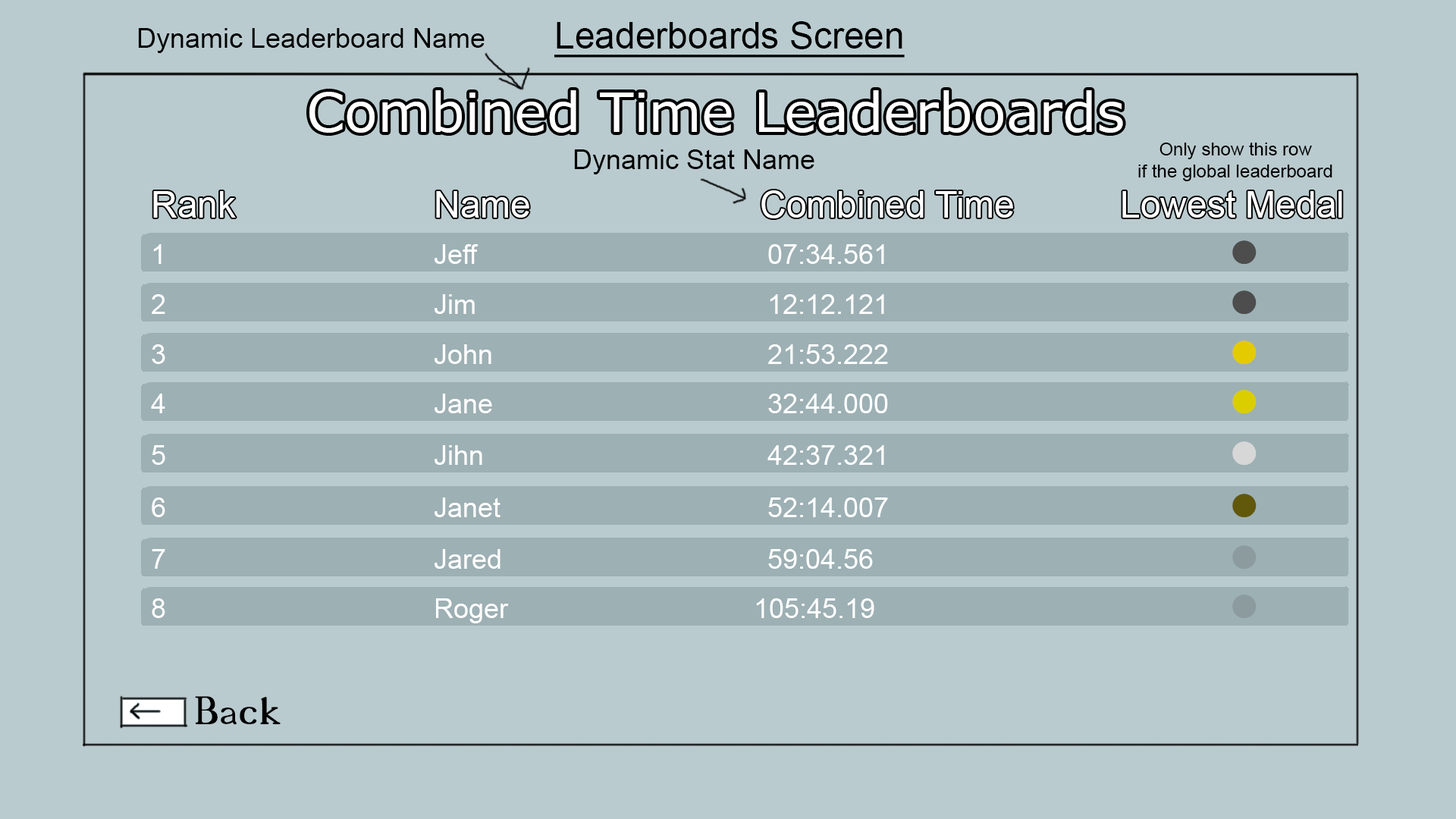
<style>
.page{position:relative;width:1456px;height:819px;background:#bacbcf}
.page>*{position:absolute;margin:0}
.t1{font:27.3px "ArialMT";color:#000000}
.t2{font:36.4px "ArialMT";color:#000000;text-decoration:underline}
.t3{font:54.6px "Verdana";color:#ffffff}
.t4{font:18.2px "ArialMT";color:#000000}
.t5{font:36.4px "ArialMT";color:#ffffff}
.t6{font:27.3px "ArialMT";color:#ffffff}
.t7{font:54.6px "ArialMT";color:#4d4d4d}
.t8{font:54.6px "ArialMT";color:#e3cb00}
.t9{font:54.6px "ArialMT";color:#dbce00}
.t10{font:54.6px "ArialMT";color:#d7d7d7}
.t11{font:54.6px "ArialMT";color:#61580b}
.t12{font:54.6px "ArialMT";color:#8c9b9e}
.t13{font:54.6px "18thCentury";color:#000000}
</style>
<div class="page">
<p class="t1" style="left:138px;top:28px;width:347px;height:25px">Dynamic Leaderboard Name</p>
<p class="t2" style="left:554px;top:21px;width:351px;height:37px">Leaderboards Screen</p>
<p class="t3" style="left:309px;top:90px;width:814px;height:43px">Combined Time Leaderboards</p>
<p class="t1" style="left:574px;top:149px;width:240px;height:25px">Dynamic Stat Name</p>
<p class="t4" style="left:1138px;top:142px;width:194px;height:39px;text-align:center">Only show this row<br>if the global leaderboard</p>
<p class="t5" style="left:153px;top:191px;width:83px;height:27px">Rank</p>
<p class="t5" style="left:436px;top:191px;width:93px;height:27px">Name</p>
<p class="t5" style="left:761px;top:190px;width:252px;height:28px">Combined Time</p>
<p class="t5" style="left:1122px;top:191px;width:220px;height:27px">Lowest Medal</p>
<p class="t6" style="left:153px;top:244px;width:9px;height:20px">1</p>
<p class="t6" style="left:434px;top:244px;width:45px;height:20px">Jeff</p>
<p class="t6" style="left:768px;top:244px;width:116px;height:20px">07:34.561</p>
<p class="t7" style="left:1232px;top:240px;width:25px;height:24px">●</p>
<p class="t7" style="left:1232px;top:290px;width:25px;height:24px">●</p>
<p class="t6" style="left:152px;top:294px;width:13px;height:20px">2</p>
<p class="t6" style="left:434px;top:294px;width:41px;height:20px">Jim</p>
<p class="t6" style="left:770px;top:294px;width:114px;height:20px">12:12.121</p>
<p class="t8" style="left:1232px;top:340px;width:25px;height:24px">●</p>
<p class="t6" style="left:152px;top:344px;width:13px;height:20px">3</p>
<p class="t6" style="left:434px;top:344px;width:57px;height:20px">John</p>
<p class="t6" style="left:768px;top:344px;width:120px;height:20px">21:53.222</p>
<p class="t9" style="left:1232px;top:390px;width:25px;height:23px">●</p>
<p class="t6" style="left:151px;top:394px;width:14px;height:19px">4</p>
<p class="t6" style="left:434px;top:394px;width:58px;height:19px">Jane</p>
<p class="t6" style="left:768px;top:394px;width:120px;height:19px">32:44.000</p>
<p class="t6" style="left:152px;top:445px;width:13px;height:20px">5</p>
<p class="t6" style="left:434px;top:445px;width:48px;height:20px">Jihn</p>
<p class="t6" style="left:767px;top:445px;width:117px;height:20px">42:37.321</p>
<p class="t10" style="left:1232px;top:441px;width:25px;height:24px">●</p>
<p class="t6" style="left:152px;top:497px;width:13px;height:20px">6</p>
<p class="t6" style="left:434px;top:497px;width:66px;height:20px">Janet</p>
<p class="t6" style="left:768px;top:497px;width:120px;height:20px">52:14.007</p>
<p class="t11" style="left:1232px;top:494px;width:25px;height:23px">●</p>
<p class="t12" style="left:1232px;top:545px;width:25px;height:24px">●</p>
<p class="t6" style="left:152px;top:549px;width:13px;height:20px">7</p>
<p class="t6" style="left:434px;top:549px;width:66px;height:20px">Jared</p>
<p class="t6" style="left:768px;top:549px;width:105px;height:20px">59:04.56</p>
<p class="t6" style="left:152px;top:598px;width:13px;height:20px">8</p>
<p class="t6" style="left:436px;top:598px;width:73px;height:25px">Roger</p>
<p class="t6" style="left:756px;top:598px;width:118px;height:20px">105:45.19</p>
<p class="t12" style="left:1232px;top:595px;width:25px;height:23px">●</p>
<p class="t13" style="left:195px;top:696px;width:86px;height:29px">Back</p>
</div>
